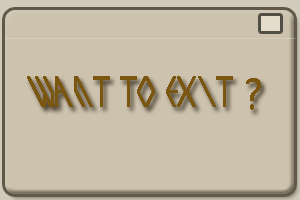
<style>
.page{position:relative;width:300px;height:200px;background:#cdc2ad}
.page>*{position:absolute;margin:0}
.t1{font:36px "exoziti";color:#865f14;font-weight:bold}
.t2{font:42px "Ebrima";color:#865f14;font-weight:bold}
</style>
<div class="page">
<p class="t1" style="left:27px;top:76px;width:234px;height:34px">WANT TO EXIT <span class="t2">?</span></p>
</div>
